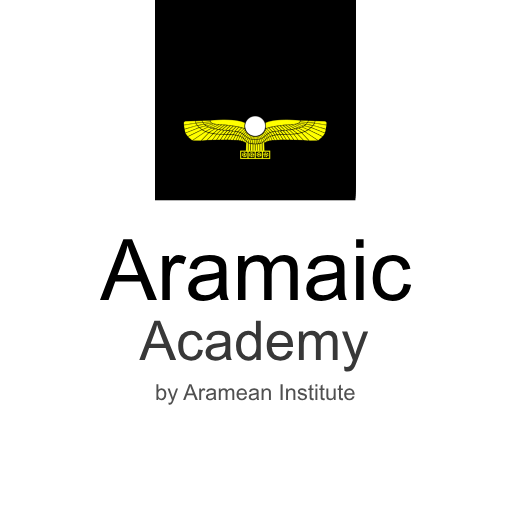
<style>
.page{position:relative;width:512px;height:512px;background:#ffffff}
.page>*{position:absolute;margin:0}
.t1{font:85px "ArialMT";color:#000000}
.t2{font:55px "ArialMT";color:#383838}
.t3{font:22px "ArialMT";color:#505050}
</style>
<div class="page">
<p class="t1" style="left:100px;top:239px;width:312px;height:62px">Aramaic</p>
<p class="t2" style="left:139px;top:320px;width:230px;height:52px">Academy</p>
<p class="t3" style="left:156px;top:384px;width:199px;height:21px">by Aramean Institute</p>
</div>
